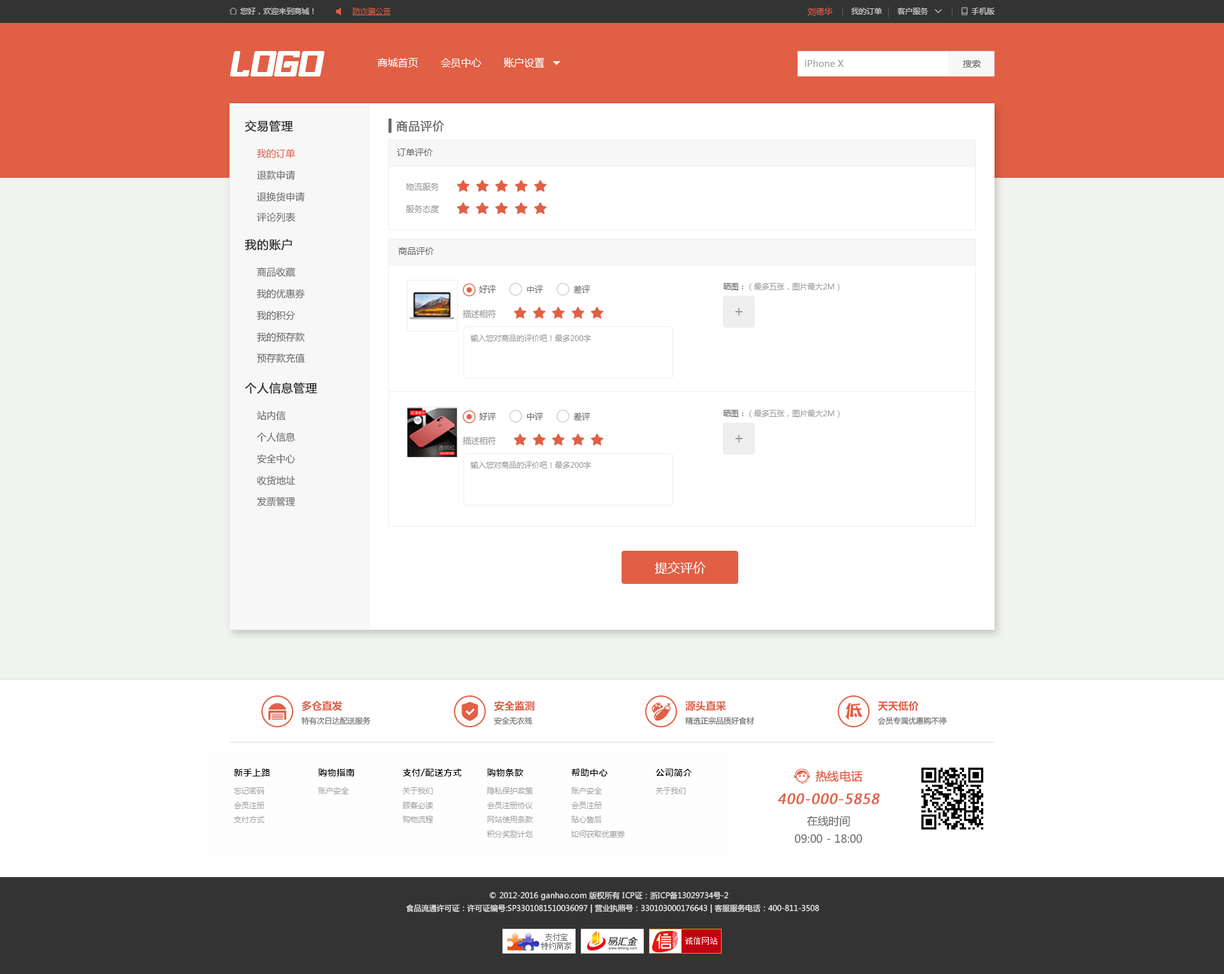
<style>
.page{position:relative;width:1224px;height:974px;background:#ffffff}
.page>*{position:absolute;margin:0}
.t1{font:8.3px "MicrosoftYaHei";color:#e15f45}
.t2{font:10.2px "MicrosoftYaHei";color:#ffffff}
.t3{font:8.9px "MicrosoftYaHei";color:#999999}
.t4{font:8.9px "MicrosoftYaHei";color:#666666}
.t5{font:11.5px "MicrosoftYaHei";color:#333333;font-weight:bold}
.t6{font:11.5px "MicrosoftYaHei";color:#666666;font-weight:bold}
.t7{font:9.6px "MicrosoftYaHei";color:#e15f45}
.t8{font:9.6px "MicrosoftYaHei";color:#666666}
.t9{font:8.3px/22.3px "MicrosoftYaHei";color:#999999}
.t10{font:8.3px "MicrosoftYaHei";color:#666666}
.t11{font:7.7px "MicrosoftYaHei";color:#999999}
.t12{font:7.7px "MicrosoftYaHei";color:#666666}
.t13{font:8.3px "MicrosoftYaHei";color:#999999}
.t14{font:14px "MicrosoftYaHei";color:#999999}
.t15{font:12.8px "MicrosoftYaHei";color:#ffffff}
.t16{font:10.2px "MicrosoftYaHei-Bold";color:#e15f45}
.t17{font:11.5px "MicrosoftYaHei";color:#e15f45;font-weight:bold}
.t18{font:13.7px "MicrosoftYaHei";color:#e15f45;font-weight:bold;font-style:italic}
.t19{font:10.8px/17.8px "MicrosoftYaHei";color:#666666}
.t20{font:7.7px/12.8px "MicrosoftYaHei";color:#eeeeee}
</style>
<div class="page">
<p class="t1" style="left:808px;top:8px;width:25px;height:8px">刘德华</p>
<p class="t2" style="left:377px;top:57px;width:167px;height:11px">商城首页       会员中心       账户设置</p>
<p class="t3" style="left:805px;top:60px;width:38px;height:7px">iPhone X</p>
<p class="t4" style="left:963px;top:60px;width:18px;height:8px">搜索</p>
<p class="t5" style="left:245px;top:120px;width:48px;height:12px">交易管理</p>
<p class="t6" style="left:388px;top:119px;width:56px;height:14px">▍商品评价</p>
<p class="t7" style="left:257px;top:149px;width:38px;height:10px">我的订单</p>
<p class="t4" style="left:397px;top:149px;width:36px;height:7px">订单评价</p>
<p class="t8" style="left:257px;top:170px;width:38px;height:10px">退款申请</p>
<p class="t9" style="left:405px;top:183px;width:34px;height:30px">物流服务<br>服务态度</p>
<p class="t8" style="left:257px;top:192px;width:48px;height:10px">退换货申请</p>
<p class="t8" style="left:257px;top:212px;width:38px;height:10px">评论列表</p>
<p class="t5" style="left:245px;top:239px;width:47px;height:12px">我的账户</p>
<p class="t4" style="left:398px;top:247px;width:36px;height:8px">商品评价</p>
<p class="t8" style="left:257px;top:267px;width:38px;height:10px">商品收藏</p>
<p class="t8" style="left:257px;top:289px;width:48px;height:9px">我的优惠券</p>
<p class="t10" style="left:479px;top:286px;width:111px;height:7px">好评            中评            差评</p>
<p class="t11" style="left:724px;top:283px;width:116px;height:8px"><span class="t12">晒图：</span>（最多五张，图片最大2M）</p>
<p class="t8" style="left:257px;top:310px;width:38px;height:10px">我的积分</p>
<p class="t13" style="left:463px;top:309px;width:33px;height:9px">描述相符</p>
<p class="t14" style="left:735px;top:308px;width:8px;height:8px">+</p>
<p class="t8" style="left:257px;top:332px;width:48px;height:10px">我的预存款</p>
<p class="t11" style="left:471px;top:335px;width:121px;height:7px">输入您对商品的评价吧！最多200字</p>
<p class="t8" style="left:257px;top:353px;width:48px;height:10px">预存款充值</p>
<p class="t5" style="left:245px;top:383px;width:72px;height:11px">个人信息管理</p>
<p class="t8" style="left:257px;top:411px;width:29px;height:10px">站内信</p>
<p class="t10" style="left:479px;top:412px;width:111px;height:9px">好评            中评            差评</p>
<p class="t11" style="left:724px;top:410px;width:116px;height:8px"><span class="t12">晒图：</span>（最多五张，图片最大2M）</p>
<p class="t8" style="left:257px;top:432px;width:38px;height:10px">个人信息</p>
<p class="t13" style="left:463px;top:436px;width:33px;height:9px">描述相符</p>
<p class="t14" style="left:735px;top:435px;width:8px;height:7px">+</p>
<p class="t8" style="left:257px;top:454px;width:38px;height:10px">安全中心</p>
<p class="t11" style="left:471px;top:462px;width:121px;height:7px">输入您对商品的评价吧！最多200字</p>
<p class="t8" style="left:257px;top:476px;width:38px;height:10px">收货地址</p>
<p class="t8" style="left:257px;top:497px;width:38px;height:9px">发票管理</p>
<p class="t15" style="left:655px;top:562px;width:51px;height:12px">提交评价</p>
<p class="t16" style="left:302px;top:701px;width:40px;height:10px">多仓直发</p>
<p class="t16" style="left:494px;top:701px;width:41px;height:10px">安全监测</p>
<p class="t16" style="left:685px;top:701px;width:41px;height:10px">源头直采</p>
<p class="t16" style="left:878px;top:701px;width:41px;height:10px">天天低价</p>
<p class="t12" style="left:302px;top:717px;width:68px;height:8px">特有次日达配送服务</p>
<p class="t12" style="left:494px;top:717px;width:38px;height:8px">安全无农残</p>
<p class="t12" style="left:685px;top:717px;width:69px;height:8px">精选正宗品质好食材</p>
<p class="t12" style="left:878px;top:717px;width:69px;height:8px">会员专属优惠购不停</p>
<p class="t17" style="left:815px;top:771px;width:48px;height:11px">热线电话</p>
<p class="t18" style="left:778px;top:793px;width:102px;height:12px">400-000-5858</p>
<p class="t19" style="left:794px;top:815px;width:69px;height:28px;text-align:center">在线时间<br>09:00 - 18:00</p>
<p class="t20" style="left:406px;top:891px;width:413px;height:23px;text-align:center">© 2012-2016 ganhao.com 版权所有 ICP证：浙ICP备13029734号-2   <br>食品流通许可证：许可证编号:SP3301081510036097 | 营业执照号：330103000176643 | 客服服务电话：400-811-3508</p>
</div>
